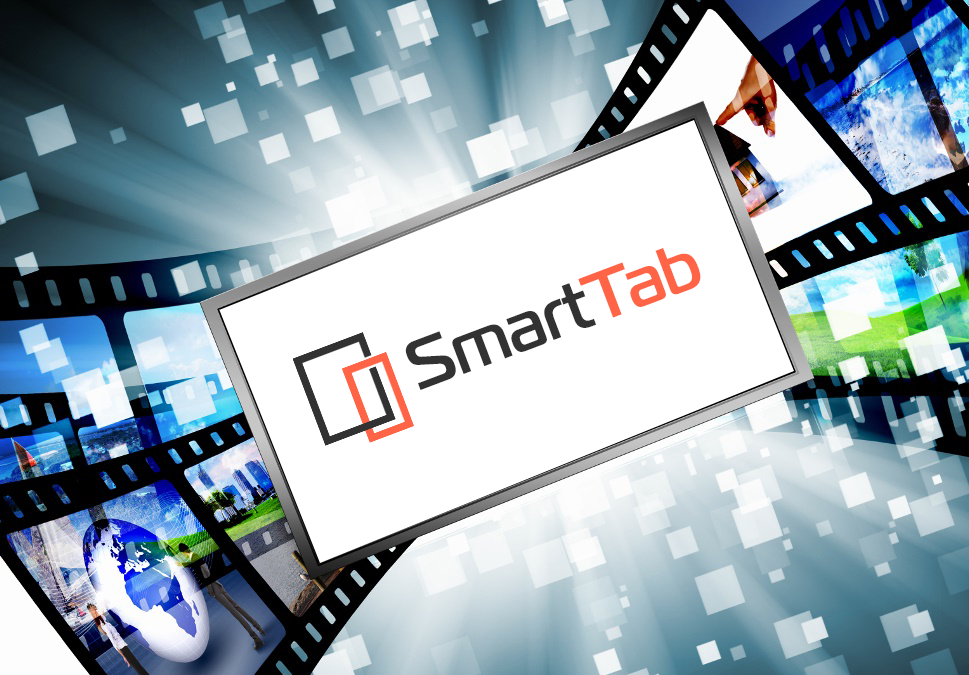
<style>
.page{position:relative;width:969px;height:675px}
.page>*{position:absolute;margin:0}
.t1{font:69px "MagistralC-Bold";color:#323232}
.t2{font:69px "MagistralC-Bold";color:#ff6446}
</style>
<div class="page">
<p class="t1" style="left:405px;top:248px;width:296px;height:142px;rotate:-21deg">Smart<span class="t2">Tab</span></p>
</div>
